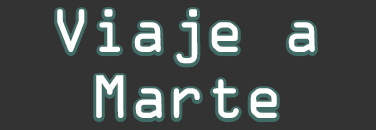
<style>
.page{position:relative;width:376px;height:130px;background:#333333}
.page>*{position:absolute;margin:0}
.t1{font:55px "OCRAStd";letter-spacing:-0.02em;color:#ffffff}
</style>
<div class="page">
<p class="t1" style="left:57px;top:9px;width:258px;height:109px;text-align:center">Viaje a<br>Marte</p>
</div>
